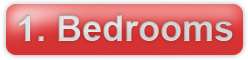
<style>
.page{position:relative;width:248px;height:60px}
.page>*{position:absolute;margin:0}
.t1{font:35.9px "Arial-BoldMT";color:#d5d5d5}
</style>
<div class="page">
<p class="t1" style="left:18px;top:15px;width:215px;height:26px">1. Bedrooms</p>
</div>
